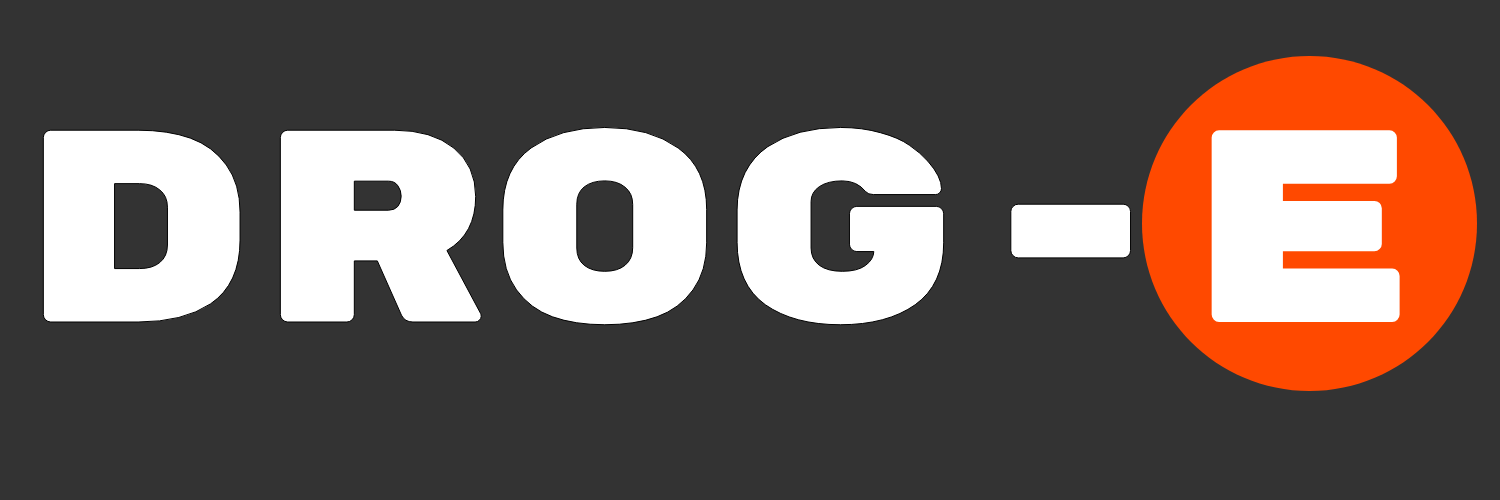
<style>
.page{position:relative;width:1500px;height:500px;background:#333333}
.page>*{position:absolute;margin:0}
.t1{font:274px "RubikMonoOne-Regular";color:#ffffff}
</style>
<div class="page">
<p class="t1" style="left:42px;top:126px;width:1359px;height:200px">DROG-E</p>
</div>
